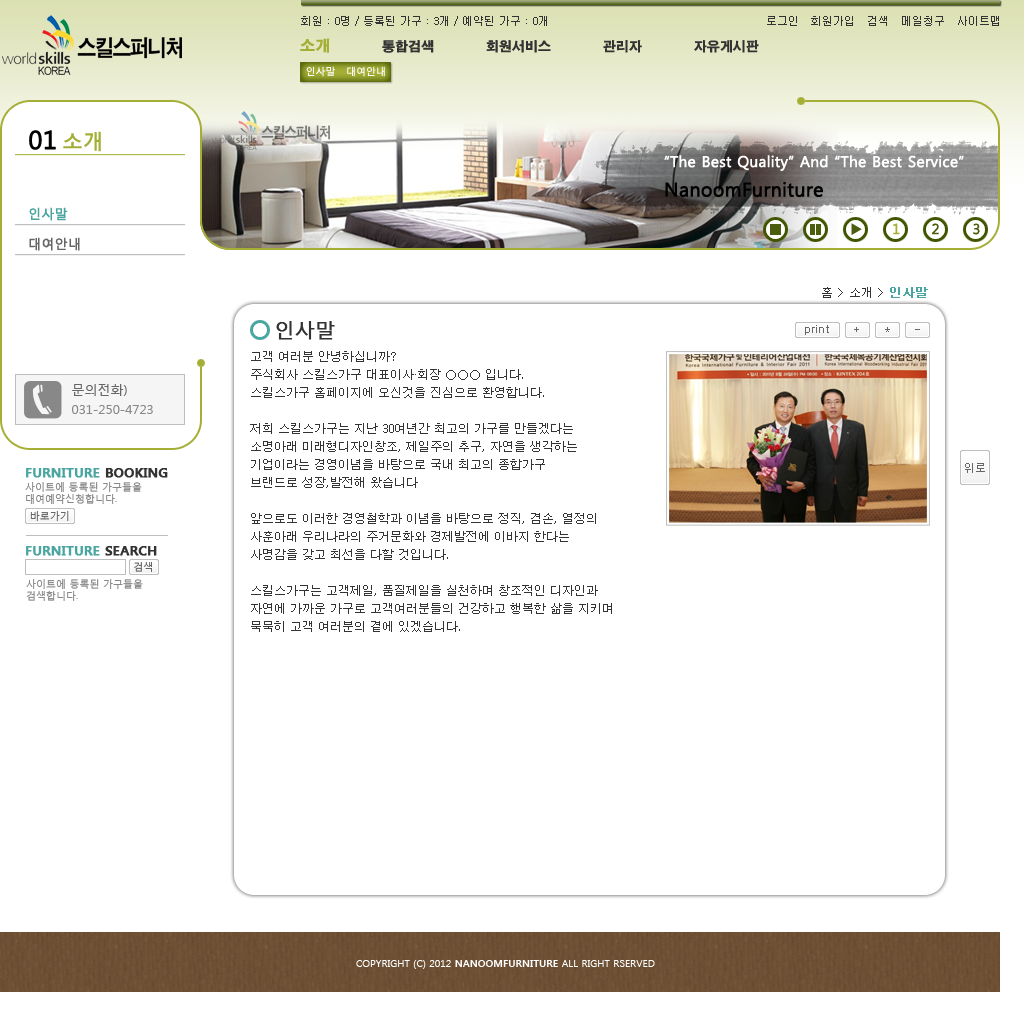
<style>
.page{position:relative;width:1024px;height:1024px;background:#ffffff}
.page>*{position:absolute;margin:0}
.t1{font:11px "Dotum";color:#333333}
.t2{font:13px "H2gtrE";color:#333333}
.t3{font:15px "H2gtrE";color:#a5af36}
.t4{font:10px "MalgunGothicRegular";color:#ffffff}
.t5{font:25px "MalgunGothicRegular";color:#000000;font-weight:bold}
.t6{font:20px "MalgunGothicRegular";color:#a3ae35;font-weight:bold}
.t7{font:13px/30px "MalgunGothicRegular";color:#666666;font-weight:bold}
.t8{font:13px/30px "MalgunGothicRegular";color:#49a5a0;font-weight:bold}
.t9{font:14px "MalgunGothicRegular";color:#a5af36;font-weight:bold}
.t10{font:14px "MalgunGothicRegular";color:#4b5e0e;font-weight:bold}
.t11{font:12px "Dotum";color:#333333}
.t12{font:12px "Dotum";color:#49a5a0;font-weight:bold}
.t13{font:20px "MalgunGothicRegular";color:#333333;font-weight:bold}
.t14{font:12px/18px "Dotum";color:#333333}
.t15{font:13px/20px "MalgunGothicRegular";color:#888888}
.t16{font:13px/20px "MalgunGothicRegular";color:#666666}
.t17{font:10px/12px "MalgunGothicRegular";color:#888888;text-transform:uppercase}
.t18{font:13px/15px "MalgunGothicBold";color:#49a5a0;text-transform:uppercase;font-weight:bold}
.t19{font:13px/15px "MalgunGothicBold";color:#333333;text-transform:uppercase;font-weight:bold}
.t20{font:11px "Dotum";color:#666666}
.t21{font:10px "MalgunGothicRegular";color:#666666;text-transform:uppercase}
.t22{font:13px "MalgunGothicBold";color:#49a5a0;text-transform:uppercase;font-weight:bold}
.t23{font:13px "MalgunGothicBold";color:#333333;text-transform:uppercase;font-weight:bold}
.t24{font:10px "MalgunGothicRegular";color:#ffffff;text-transform:uppercase}
.t25{font:10px "MalgunGothicBold";color:#ffffff;text-transform:uppercase}
</style>
<div class="page">
<p class="t1" style="left:301px;top:16px;width:246px;height:10px">회원 : 0명 / 등록된 가구 : 3개 / 예약된 가구 : 0개</p>
<p class="t1" style="left:767px;top:16px;width:232px;height:10px">로그인   회원가입   검색   메일청구   사이트맵</p>
<p class="t2" style="left:300px;top:38px;width:459px;height:15px"><span class="t3">소개</span>            통합검색            회원서비스            관리자            자유게시판</p>
<p class="t4" style="left:306px;top:66px;width:79px;height:11px">인사말   대여안내</p>
<p class="t5" style="left:29px;top:130px;width:27px;height:20px">01</p>
<p class="t6" style="left:63px;top:131px;width:38px;height:21px">소개</p>
<p class="t7" style="left:29px;top:207px;width:51px;height:44px"><span class="t8">인사말<br></span>대여안내</p>
<p class="t9" style="left:893px;top:223px;width:7px;height:12px">1</p>
<p class="t10" style="left:932px;top:223px;width:7px;height:12px">2</p>
<p class="t10" style="left:973px;top:223px;width:7px;height:12px">3</p>
<p class="t11" style="left:822px;top:287px;width:106px;height:11px">홈 &gt; 소개 &gt; <span class="t12">인사말</span></p>
<p class="t13" style="left:276px;top:321px;width:59px;height:19px">인사말</p>
<p class="t14" style="left:250px;top:351px;width:362px;height:281px">고객 여러분 안녕하십니까?<br>주식회사 스킬스가구 대표이사·회장 ○○○ 입니다.<br>스킬스가구 홈페이지에 오신것을 진심으로 환영합니다.<br><br>저희 스킬스가구는 지난 30여년간 최고의 가구를 만들겠다는<br>소명아래 미래형디자인창조, 제일주의 추구, 자연을 생각하는<br>기업이라는 경영이념을 바탕으로 국내 최고의 종합가구<br>브랜드로 성장,발전해 왔습니다<br><br>앞으로도 이러한 경영철학과 이념을 바탕으로 정직, 겸손, 열정의<br>사훈아래 우리나라의 주거문화와 경제발전에 이바지 한다는<br>사명감을 갖고 최선을 다할 것입니다.<br><br>스킬스가구는 고객제일, 품질제일을 실천하며 창조적인 디자인과<br>자연에 가까운 가구로 고객여러분들의 건강하고 행복한 삶을 지키며<br>묵묵히 고객 여러분의 곁에 있겠습니다.</p>
<p class="t15" style="left:72px;top:384px;width:81px;height:30px"><span class="t16">문의전화)<br></span>031-250-4723</p>
<p class="t17" style="left:25px;top:468px;width:143px;height:36px"><span class="t18">furniture </span><span class="t19">booking<br></span>사이트에 등록된 가구들을<br>대여예약신청합니다.</p>
<p class="t20" style="left:965px;top:463px;width:20px;height:10px">위로</p>
<p class="t21" style="left:30px;top:511px;width:39px;height:10px">바로가기</p>
<p class="t22" style="left:26px;top:546px;width:131px;height:10px">furniture <span class="t23">Search</span></p>
<p class="t21" style="left:134px;top:562px;width:18px;height:10px">검색</p>
<p class="t17" style="left:26px;top:579px;width:117px;height:22px">사이트에 등록된 가구들을<br>검색합니다.</p>
<p class="t24" style="left:356px;top:960px;width:299px;height:9px">copyright (c) 2012 <span class="t25">nanoomfurniture </span>all right rserved</p>
</div>
